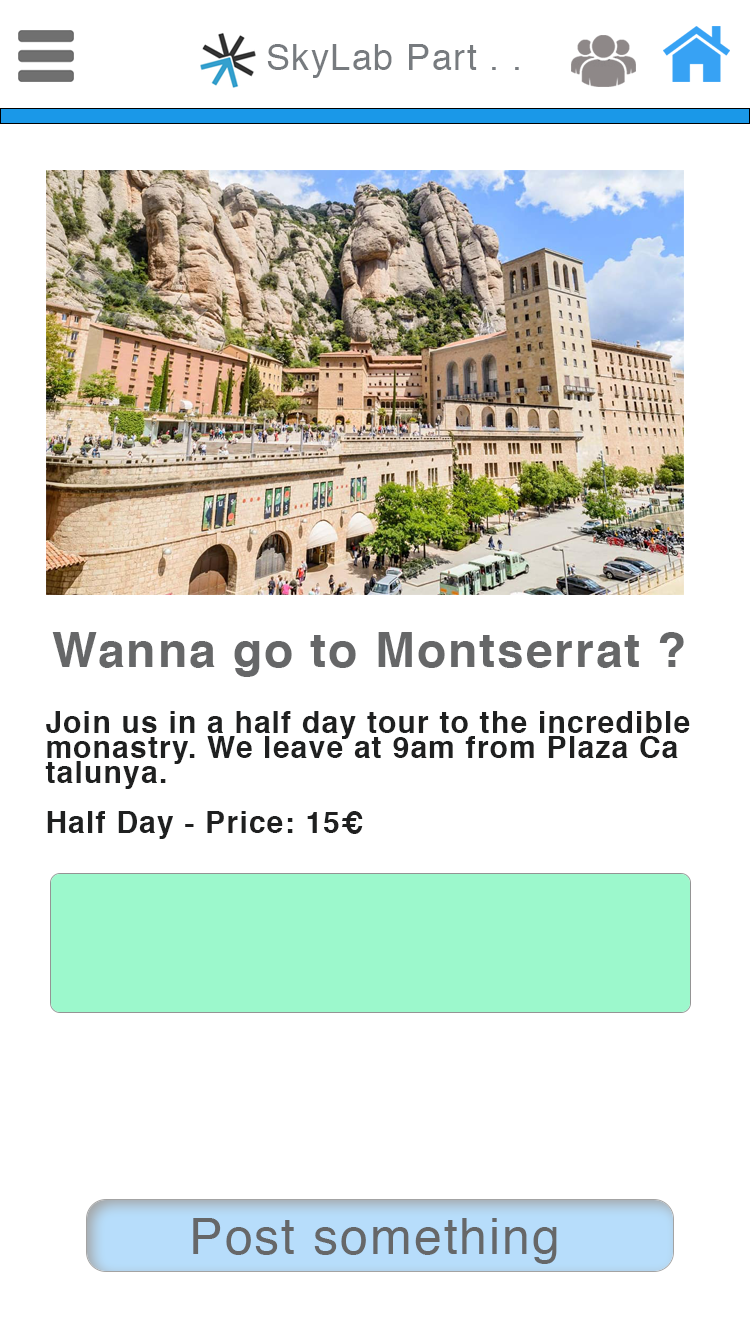
<style>
.page{position:relative;width:750px;height:1334px;background:#ffffff}
.page>*{position:absolute;margin:0}
.t1{font:36px "Helvetica";letter-spacing:0.04em;color:#777b7f}
.t2{font:48px "Helvetica-Bold";letter-spacing:0.04em;color:#666768}
.t3{font:30px/25px "Helvetica-Bold";letter-spacing:0.04em;color:#1f2020}
.t4{font:50px "Helvetica";letter-spacing:0.04em;color:#666768}
</style>
<div class="page">
<p class="t1" style="left:267px;top:44px;width:252px;height:34px">SkyLab Part . .</p>
<p class="t2" style="left:52px;top:632px;width:632px;height:45px">Wanna go to Montserrat ?</p>
<p class="t3" style="left:45px;top:711px;width:645px;height:128px">Join us in a half day tour to the incredible <br>monastry. We leave at 9am from Plaza Ca<br>talunya.<br><br>Half Day - Price: 15€</p>
<p class="t4" style="left:193px;top:1218px;width:364px;height:46px">Post something</p>
</div>
